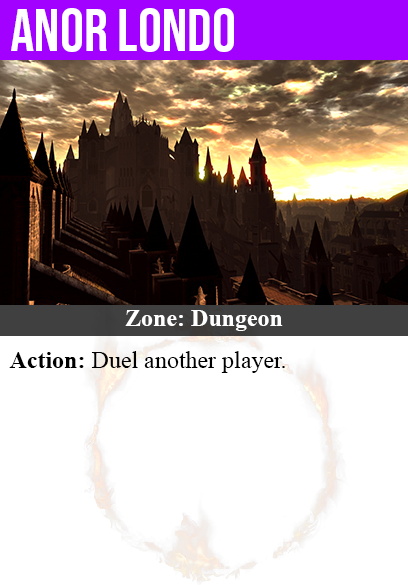
<style>
.page{position:relative;width:408px;height:585px;background:#ffffff}
.page>*{position:absolute;margin:0}
.t1{font:60px "BebasNeue-Regular";color:#ffffff}
.t2{font:24px "TimesNewRomanPS-BoldMT";color:#ffffff}
.t3{font:24px "TimesNewRomanPSMT";color:#000000}
.t4{font:24px "TimesNewRomanPS-BoldMT";color:#000000}
</style>
<div class="page">
<p class="t1" style="left:11px;top:8px;width:223px;height:44px">anor londo</p>
<p class="t2" style="left:125px;top:310px;width:158px;height:21px">Zone: Dungeon</p>
<p class="t3" style="left:9px;top:351px;width:276px;height:22px"><span class="t4">Action:</span> Duel another player.</p>
</div>
